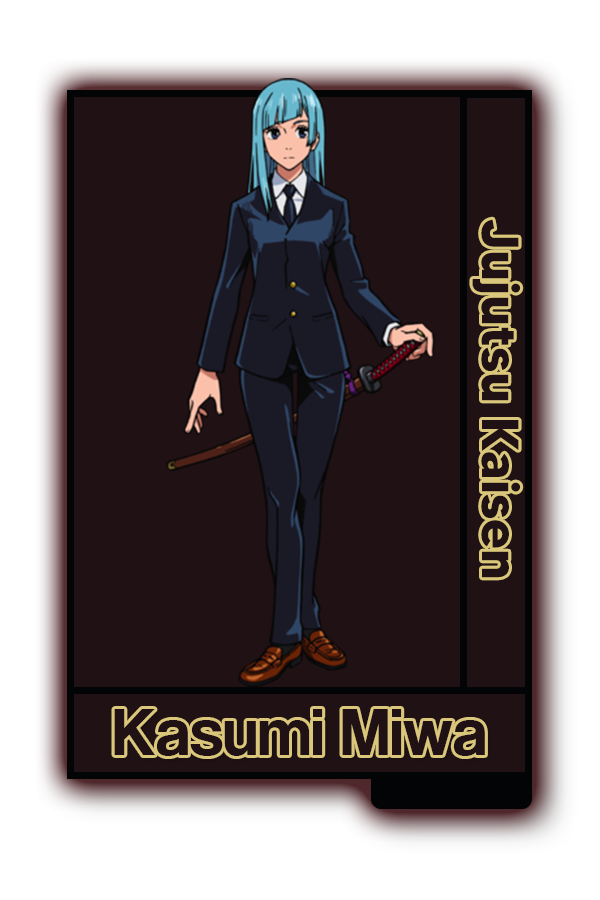
<style>
.page{position:relative;width:600px;height:900px;background:#1f1114}
.page>*{position:absolute;margin:0}
.t1{font:52px "MADETOMMY-Bold";color:#1e1214}
.t2{font:70.1px "CoolveticaRg-Regular";color:#1e1214}
</style>
<div class="page">
<p class="t1" style="left:472px;top:219px;width:49px;height:359px;rotate:90deg">Jujutsu Kaisen</p>
<p class="t2" style="left:114px;top:709px;width:371px;height:47px">Kasumi Miwa</p>
</div>
